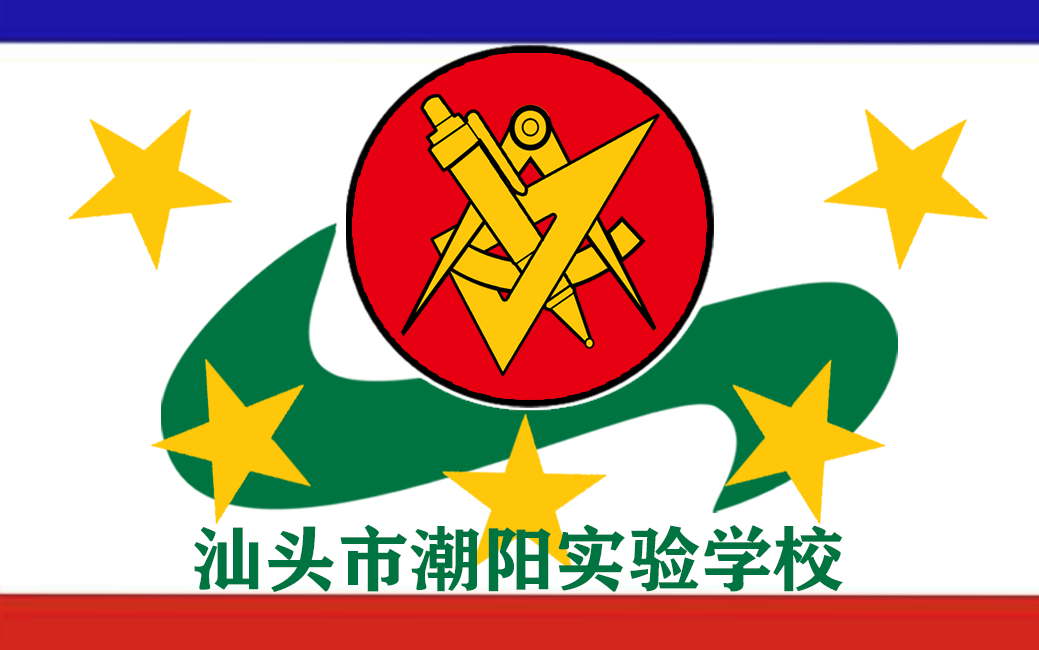
<style>
.page{position:relative;width:1039px;height:650px;background:#ffffff}
.page>*{position:absolute;margin:0}
.t1{font:71.3px "FZCHSJW--GB1-0";color:#007440}
</style>
<div class="page">
<p class="t1" style="left:194px;top:524px;width:649px;height:68px">汕头市潮阳实验学校</p>
</div>
